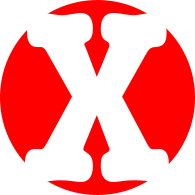
<style>
.page{position:relative;width:195px;height:195px;background:#ffffff}
.page>*{position:absolute;margin:0}
.t1{font:250px "AmericanTypewriter-CondensedBold";color:#ffffff}
</style>
<div class="page">
<p class="t1" style="left:24px;top:13px;width:145px;height:169px">X</p>
</div>
